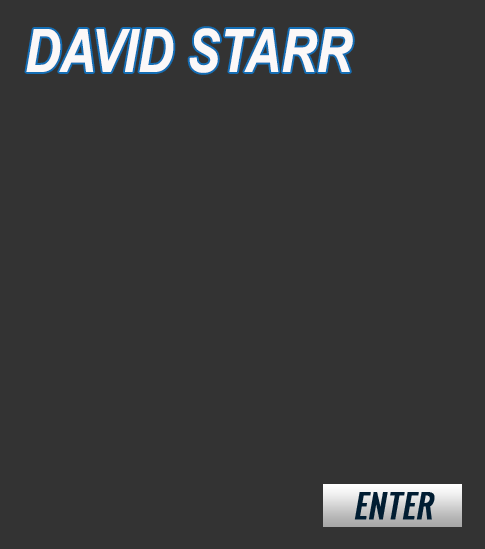
<style>
.page{position:relative;width:485px;height:549px;background:#333333}
.page>*{position:absolute;margin:0}
.t1{font:60px "ArialNarrow-BoldItalic";color:#fbf8f8}
</style>
<div class="page">
<p class="t1" style="left:26px;top:28px;width:327px;height:45px">DAVID STARR</p>
</div>
